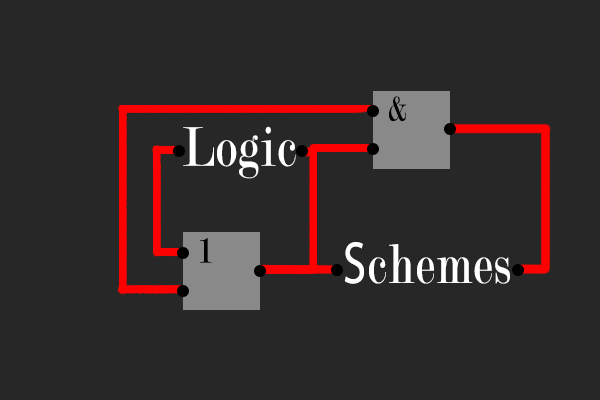
<style>
.page{position:relative;width:600px;height:400px;background:#282727}
.page>*{position:absolute;margin:0}
.t1{font:37.6px "Modern-Regular";letter-spacing:0.04em;color:#000000;scale:0.78 1}
.t2{font:59.5px "Modern-Regular";letter-spacing:0.04em;color:#ffffff;scale:0.78 1}
.t3{font:59.5px "MyriadPro-Regular";letter-spacing:0.04em;color:#ffffff;scale:0.78 1}
</style>
<div class="page">
<p class="t1" style="left:389px;top:96px;width:18px;height:26px">&amp;</p>
<p class="t2" style="left:183px;top:126px;width:113px;height:53px">Logic</p>
<p class="t1" style="left:200px;top:238px;width:12px;height:25px">1</p>
<p class="t2" style="left:344px;top:242px;width:166px;height:42px"><span class="t3">S</span>chemes</p>
</div>
